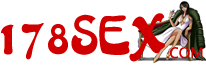
<style>
.page{position:relative;width:206px;height:65px;background:#ffffff}
.page>*{position:absolute;margin:0}
.t1{font:60px "FZLXTFW--GB1-0";color:#d00000}
.t2{font:14px "MicrosoftYaHei";color:#d00000}
</style>
<div class="page">
<p class="t1" style="left:0px;top:13px;width:165px;height:49px">178SEX</p>
<p class="t2" style="left:166px;top:47px;width:37px;height:12px">.COM</p>
</div>
